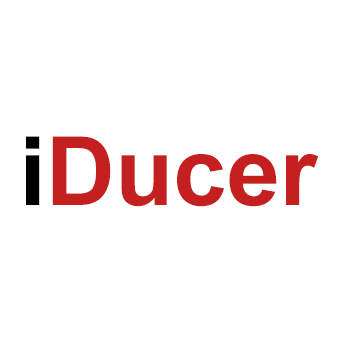
<style>
.page{position:relative;width:340px;height:340px;background:#ffffff}
.page>*{position:absolute;margin:0}
.t1{font:95.7px "Arial-BoldMT";color:#c52020}
.t2{font:17.9px "Arial-BoldMT";color:#d5d9ba}
.t3{font:95.7px "Arial-BoldMT";color:#000000}
</style>
<div class="page">
<p class="t1" style="left:26px;top:136px;width:293px;height:71px"><span class="t2"><br></span><span class="t3">i</span>Ducer</p>
</div>
